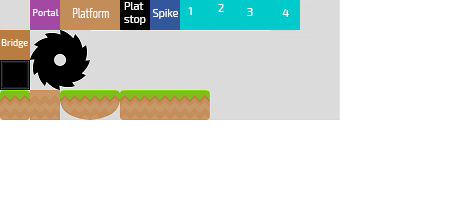
<style>
.page{position:relative;width:456px;height:210px;background:#ffffff}
.page>*{position:absolute;margin:0}
.t1{font:10.7px "Exo2-Regular";color:#ffffff}
.t2{font:9.3px "Exo2-Regular";color:#ffffff}
.t3{font:13.3px "Exo2-Regular";color:#ffffff;scale:0.69 1}
.t4{font:9.2px "Exo2-Regular";color:#ffffff}
</style>
<div class="page">
<p class="t1" style="left:124px;top:2px;width:22px;height:23px">Plat <br>stop</p>
<p class="t1" style="left:218px;top:4px;width:6px;height:8px">2</p>
<p class="t2" style="left:33px;top:9px;width:26px;height:7px">Portal</p>
<p class="t3" style="left:73px;top:8px;width:36px;height:10px">Platform</p>
<p class="t1" style="left:153px;top:9px;width:25px;height:10px">Spike</p>
<p class="t1" style="left:188px;top:7px;width:4px;height:8px">1</p>
<p class="t1" style="left:247px;top:8px;width:6px;height:8px">3</p>
<p class="t1" style="left:282px;top:9px;width:7px;height:8px">4</p>
<p class="t4" style="left:1px;top:39px;width:27px;height:9px">Bridge</p>
</div>
